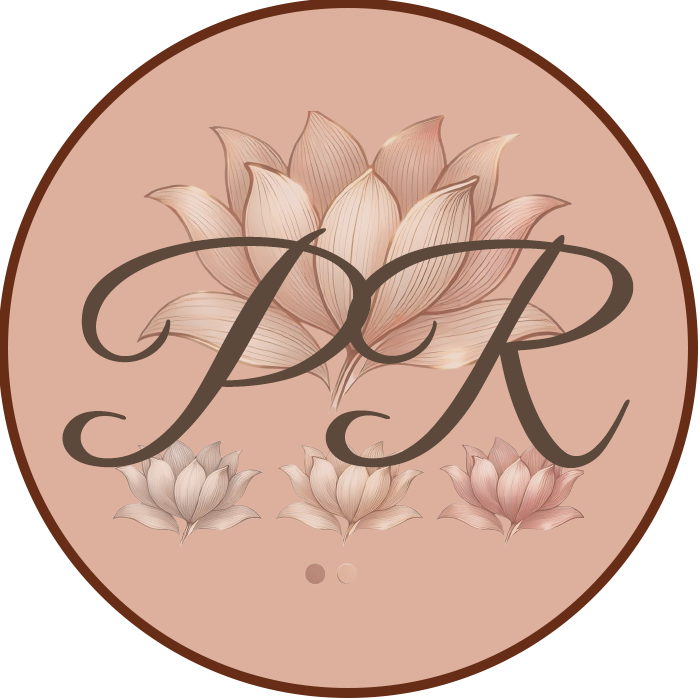
<style>
.page{position:relative;width:700px;height:700px;background:#ddb09d}
.page>*{position:absolute;margin:0}
.t1{font:280px "GreatVibes-Regular";color:#5d483c}
</style>
<div class="page">
<p class="t1" style="left:62px;top:228px;width:572px;height:240px">PR</p>
</div>
